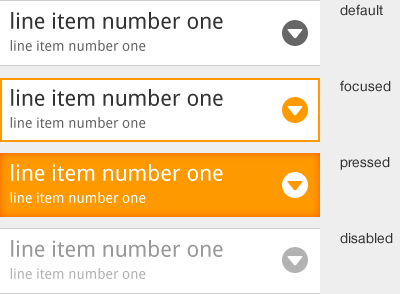
<style>
.page{position:relative;width:400px;height:294px;background:#ffffff}
.page>*{position:absolute;margin:0}
.t1{font:14px/76px "HelveticaNeue-Roman";color:#333333}
.t2{font:22px/22px "DroidSans";color:#333333}
.t3{font:14px/22px "DroidSans";color:#666666}
.t4{font:22px/22px "DroidSans";color:#ffffff}
.t5{font:14px/22px "DroidSans";color:#ffffff}
.t6{font:22px/22px "DroidSans";color:#999999}
.t7{font:14px/22px "DroidSans";color:#999999}
</style>
<div class="page">
<p class="t1" style="left:340px;top:4px;width:53px;height:240px">default<br>focused<br>pressed<br>disabled</p>
<p class="t2" style="left:10px;top:12px;width:213px;height:39px">line item number one<br><span class="t3">line item number one</span></p>
<p class="t2" style="left:10px;top:89px;width:213px;height:39px">line item number one<br><span class="t3">line item number one</span></p>
<p class="t4" style="left:10px;top:164px;width:213px;height:39px">line item number one<br><span class="t5">line item number one</span></p>
<p class="t6" style="left:10px;top:240px;width:213px;height:39px">line item number one<br><span class="t7">line item number one</span></p>
</div>
